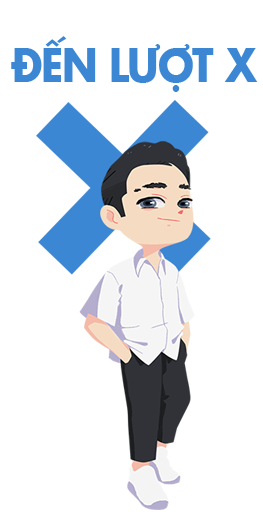
<style>
.page{position:relative;width:263px;height:516px;background:#ffffff}
.page>*{position:absolute;margin:0}
.t1{font:44px "SFUFuturaBold";letter-spacing:-0.035em;color:#3b87d4;scale:0.92 1}
</style>
<div class="page">
<p class="t1" style="left:11px;top:36px;width:247px;height:56px">ĐẾN LƯỢT X</p>
</div>
